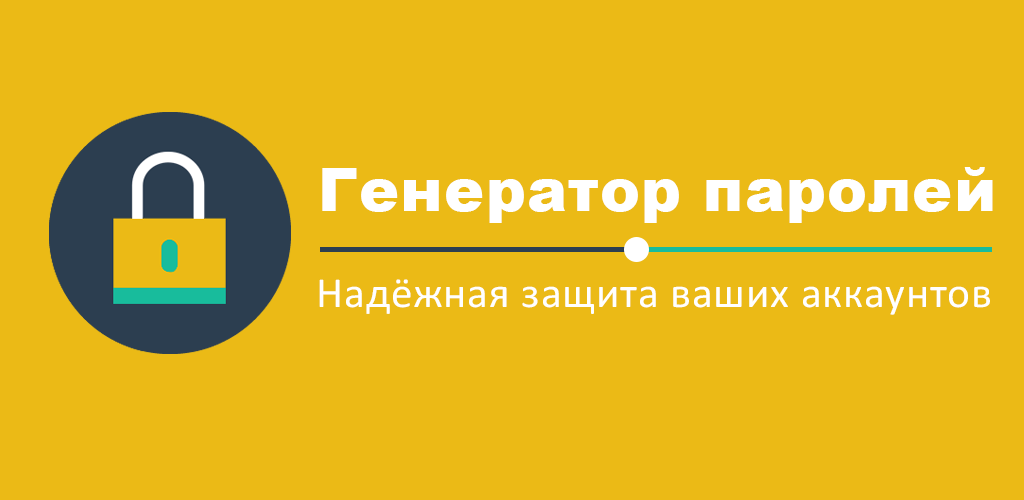
<style>
.page{position:relative;width:1024px;height:500px;background:#ebba16}
.page>*{position:absolute;margin:0}
.t1{font:60px "Arial-Black";letter-spacing:0.02em;color:#ffffff}
.t2{font:43px "Calibri";letter-spacing:0.02em;color:#ffffff}
</style>
<div class="page">
<p class="t1" style="left:322px;top:167px;width:671px;height:56px">Генератор паролей</p>
<p class="t2" style="left:319px;top:279px;width:671px;height:36px">Надёжная защита ваших аккаунтов</p>
</div>
